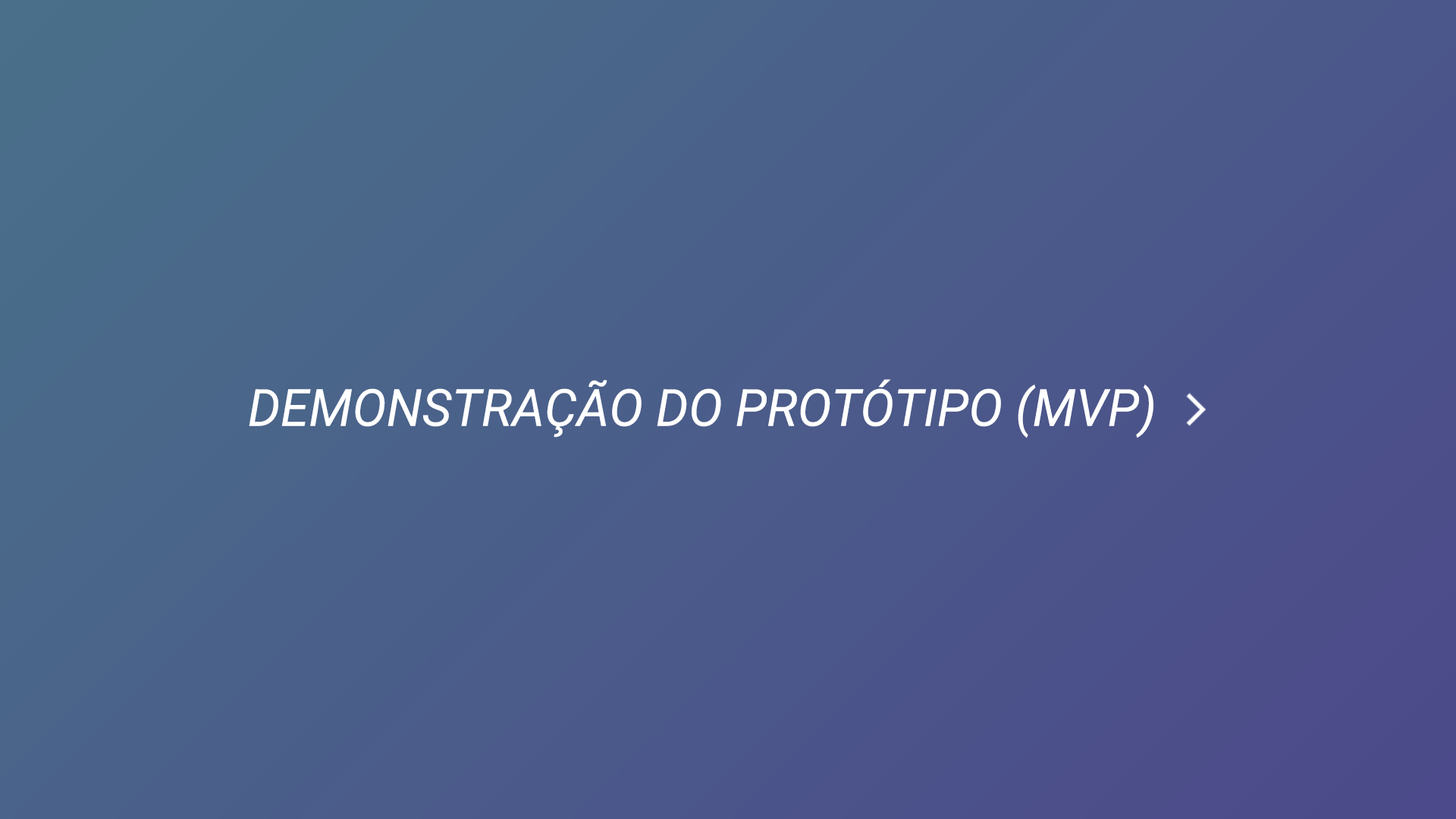
<style>
.page{position:relative;width:1456px;height:819px}
.page>*{position:absolute;margin:0}
.t1{font:51.2px "Roboto-Italic";color:#ffffff}
</style>
<div class="page">
<p class="t1" style="left:249px;top:379px;width:904px;height:59px">DEMONSTRAÇÃO DO PROTÓTIPO (MVP)</p>
</div>
